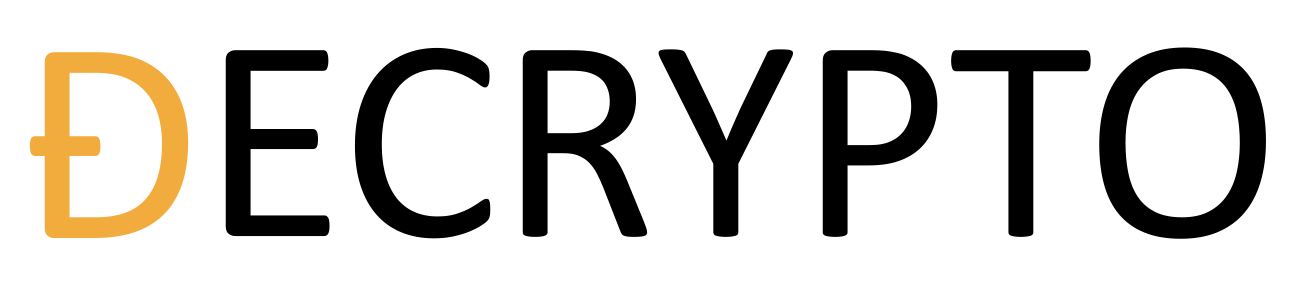
<style>
.page{position:relative;width:1296px;height:288px;background:#ffffff}
.page>*{position:absolute;margin:0}
.t1{font:293.9px "Calibri";color:#f2ab3d}
.t2{font:293.9px "Calibri";color:#000000}
</style>
<div class="page">
<p class="t1" style="left:44px;top:52px;width:145px;height:186px">D</p>
<p class="t2" style="left:225px;top:47px;width:1041px;height:192px">ECRYPTO</p>
<p class="t1" style="left:29px;top:136px;width:72px;height:20px">-</p>
</div>
